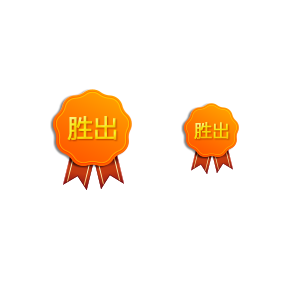
<style>
.page{position:relative;width:300px;height:300px;background:#ffffff}
.page>*{position:absolute;margin:0}
.t1{font:26px "FZLTHK--GBK1-0";letter-spacing:-0.05em;font-weight:bold}
.t2{font:18.3px "FZLTHK--GBK1-0";letter-spacing:-0.05em;font-weight:bold}
</style>
<div class="page">
<p class="t1" style="left:67px;top:116px;width:50px;height:25px">胜出</p>
<p class="t2" style="left:194px;top:122px;width:35px;height:17px">胜出</p>
</div>
